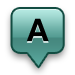
<style>
.page{position:relative;width:75px;height:75px;background:#ffffff}
.page>*{position:absolute;margin:0}
.t1{font:31.3px "HelveticaNeue-Bold";color:#000000}
</style>
<div class="page">
<p class="t1" style="left:26px;top:18px;width:23px;height:23px">A</p>
</div>
